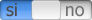
<style>
.page{position:relative;width:92px;height:20px}
.page>*{position:absolute;margin:0}
.t1{font:18px "Tahoma";color:#4c4a4a}
.t2{font:18px "Tahoma";color:#717171}
</style>
<div class="page">
<p class="t1" style="left:6px;top:3px;width:11px;height:14px">si</p>
<p class="t2" style="left:66px;top:6px;width:18px;height:11px">no</p>
</div>
